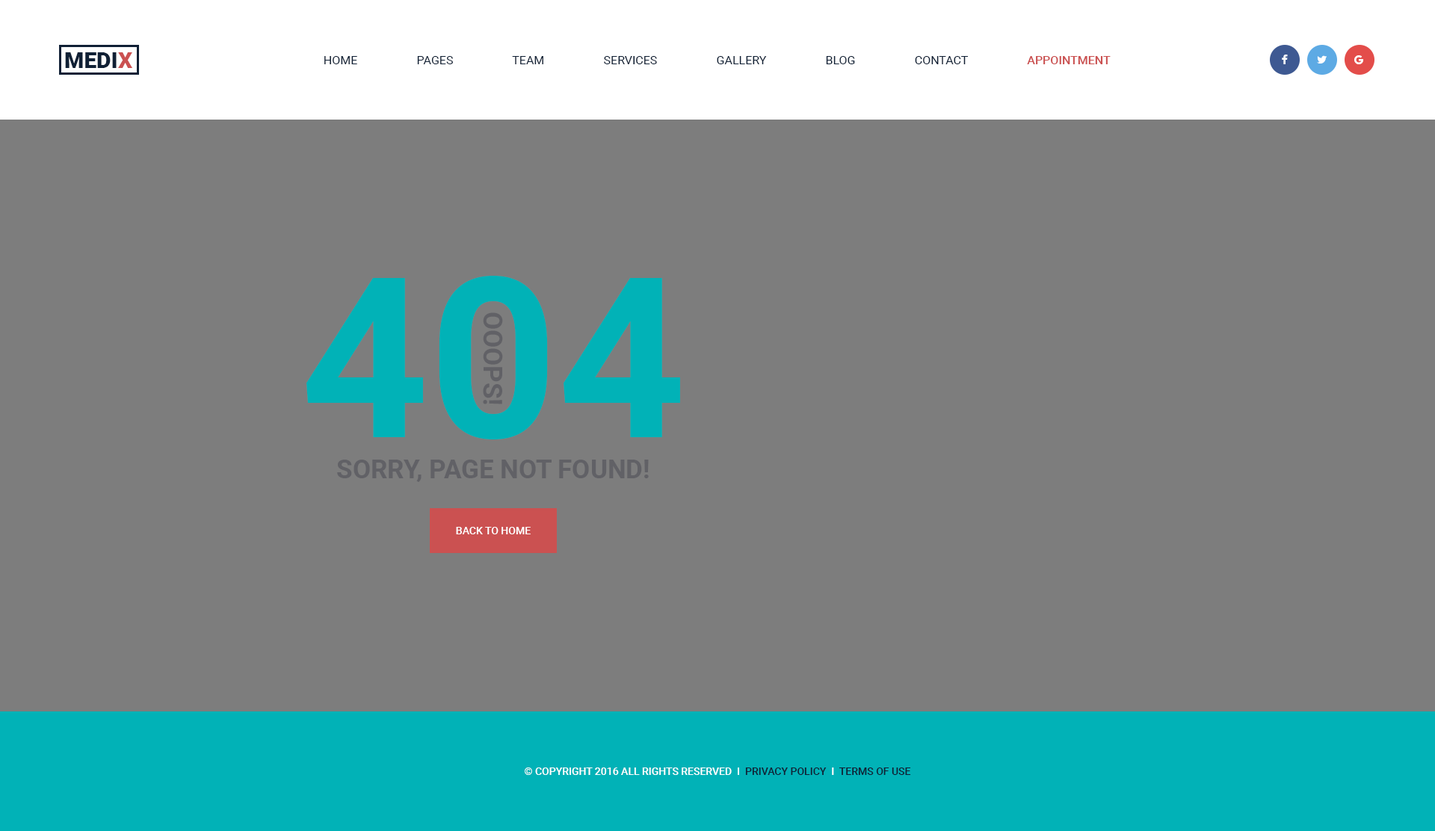
<style>
.page{position:relative;width:1435px;height:831px;background:#7d7d7d}
.page>*{position:absolute;margin:0}
.t1{font:22.4px "Roboto-Black";color:#102035;text-transform:uppercase}
.t2{font:22.4px "Roboto-Black";color:#cb5151;text-transform:uppercase}
.t3{font:12px "Roboto-Regular";color:#102035;text-transform:uppercase}
.t4{font:12px "Roboto-Medium";color:#cb5151;text-transform:uppercase}
.t5{font:224.2px "Roboto-Bold";color:#01b2b7;text-transform:uppercase}
.t6{font:26.2px "Roboto-Bold";color:#616166;text-transform:uppercase}
.t7{font:10.5px "Roboto-Medium";color:#ffffff;text-transform:uppercase}
.t8{font:10.5px "Roboto-Medium";color:#102035;text-transform:uppercase}
</style>
<div class="page">
<p class="t1" style="left:65px;top:52px;width:68px;height:16px">Medi<span class="t2">x</span></p>
<p class="t3" style="left:324px;top:56px;width:787px;height:8px">Home                    Pages                    Team                    Services                    Gallery                    Blog                    Contact                    <span class="t4">Appointment</span></p>
<p class="t5" style="left:306px;top:276px;width:374px;height:163px">404</p>
<p class="t6" style="left:483px;top:312px;width:20px;height:92px;rotate:90deg">ooops!</p>
<p class="t6" style="left:337px;top:460px;width:312px;height:22px">SORRY, PAGE NOT FOUND!</p>
<p class="t7" style="left:456px;top:527px;width:75px;height:7px">Back to home</p>
<p class="t7" style="left:525px;top:768px;width:386px;height:7px">© Copyright 2016 All Rights Reserved  i  <span class="t8">Privacy Policy</span>  i  <span class="t8">Terms of Use</span></p>
</div>
